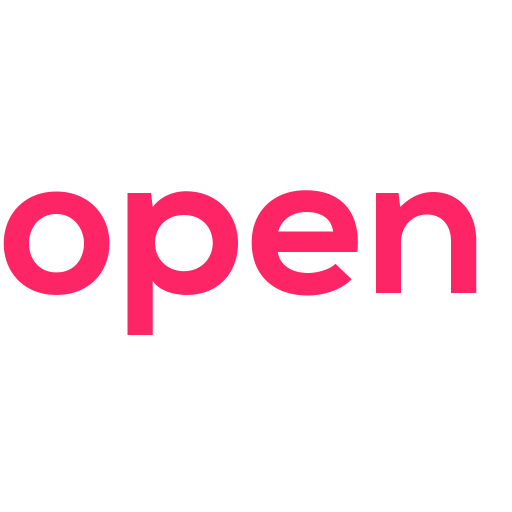
<style>
.page{position:relative;width:512px;height:512px;background:#ffffff}
.page>*{position:absolute;margin:0}
.t1{font:201.8px "NexaBold";color:#fe2566}
</style>
<div class="page">
<p class="t1" style="left:3px;top:190px;width:474px;height:145px">open</p>
</div>
